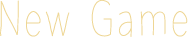
<style>
.page{position:relative;width:188px;height:37px;background:#ffffff}
.page>*{position:absolute;margin:0}
.t1{font:50px "AvenirCondensedHand";color:#eed694}
</style>
<div class="page">
<p class="t1" style="left:0px;top:0px;width:188px;height:37px">New Game</p>
</div>
